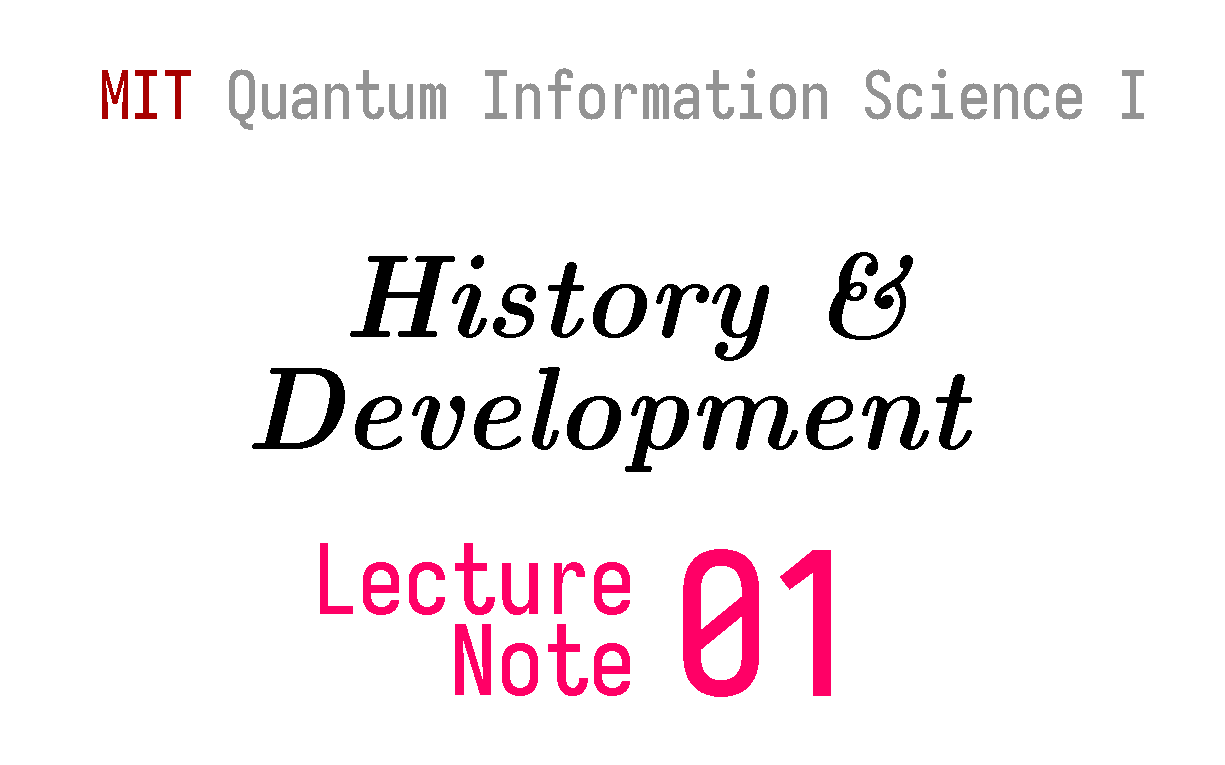
<style>
.page{position:relative;width:1225px;height:765px;background:#ffffff}
.page>*{position:absolute;margin:0}
.t1{font:67px "Iosevka-Medium";color:#939393;scale:0.95 1}
.t2{font:67px "Iosevka-Medium";color:#a80000;scale:0.95 1}
.t3{font:118px/112.7px "CMUSerif-BoldItalic";color:#000000;scale:0.95 1}
.t4{font:97px/80.7px "Iosevka-Medium";color:#ff0066;scale:0.95 1}
.t5{font:199px "Iosevka-Medium";color:#ff0066;scale:0.95 1}
</style>
<div class="page">
<p class="t1" style="left:102px;top:68px;width:1042px;height:62px"><span class="t2">MIT </span>Quantum Information Science I</p>
<p class="t3" style="left:252px;top:252px;width:720px;height:220px;text-align:center">History &amp;<br>Development</p>
<p class="t4" style="left:320px;top:543px;width:310px;height:153px;text-align:right">Lecture<br>Note</p>
<p class="t5" style="left:683px;top:549px;width:148px;height:148px">01</p>
</div>
